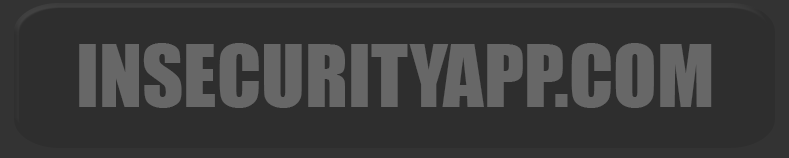
<style>
.page{position:relative;width:789px;height:158px;background:#2e2e2e}
.page>*{position:absolute;margin:0}
.t1{font:80px "Impact";color:#676767}
</style>
<div class="page">
<p class="t1" style="left:79px;top:43px;width:633px;height:65px">INSECURITYAPP.COM</p>
</div>
